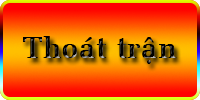
<style>
.page{position:relative;width:200px;height:100px}
.page>*{position:absolute;margin:0}
.t1{font:30px "VNI-Meli-Bold";color:#000000}
</style>
<div class="page">
<p class="t1" style="left:23px;top:36px;width:154px;height:28px">Thoaùt traän</p>
</div>
